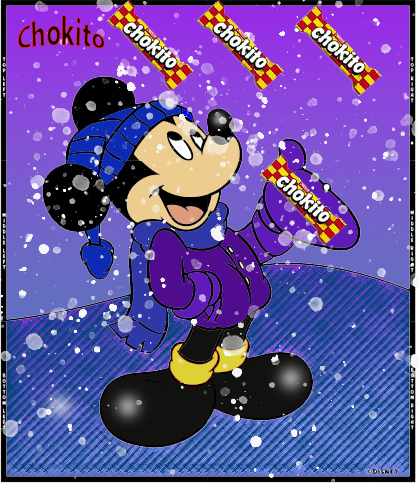
<style>
.page{position:relative;width:419px;height:485px}
.page>*{position:absolute;margin:0}
.t1{font:25px "MyriadPro-Bold"}
</style>
<div class="page">
<p class="t1" style="left:18px;top:15px;width:87px;height:34px">Chokito</p>
</div>
